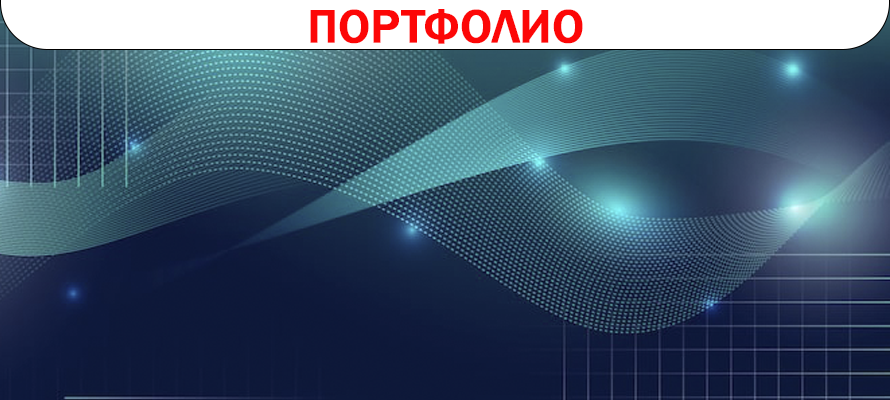
<style>
.page{position:relative;width:890px;height:400px}
.page>*{position:absolute;margin:0}
.t1{font:48px "FranklinGothic-Medium";color:#fc0707;text-transform:uppercase;font-weight:bold}
</style>
<div class="page">
<p class="t1" style="left:310px;top:9px;width:273px;height:35px">Портфолио</p>
</div>
